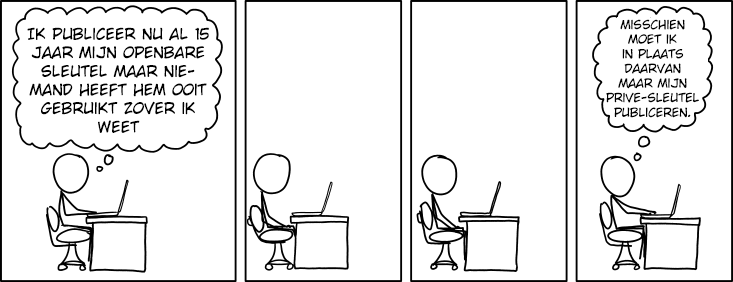
<style>
.page{position:relative;width:733px;height:282px;background:#ffffff}
.page>*{position:absolute;margin:0}
.t1{font:15.5px "CCWildWordsRoman";color:#000000}
.t2{font:12.2px "CCWildWordsRoman";color:#000000}
</style>
<div class="page">
<p class="t1" style="left:27px;top:27px;width:182px;height:106px;text-align:center">Ik publiceer nu al 15 jaar mijn openbare sleutel maar niemand heeft hem ooit gebruikt zover ik weet</p>
<p class="t2" style="left:606px;top:19px;width:93px;height:99px;text-align:center">Misschien moet ik<br>in plaats <br>daarvan <br>maar mijn prive-sleutel publiceren.</p>
</div>
